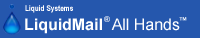
<style>
.page{position:relative;width:200px;height:38px;background:#2557ad}
.page>*{position:absolute;margin:0}
.t1{font:8px "ArialNarrow-Bold";color:#ffffff}
.t2{font:8px "Arial-BoldMT"}
.t3{font:8px "Arial-BoldMT";color:#ffffff}
.t4{font:15.9px "Arial-BoldMT";color:#ffffff}
.t5{font:15.9px "ArialMT";color:#ffffff}
</style>
<div class="page">
<p class="t1" style="left:25px;top:5px;width:48px;height:8px">Liquid Systems</p>
<p class="t2" style="left:104px;top:16px;width:6px;height:6px">®</p>
<p class="t3" style="left:179px;top:17px;width:8px;height:4px">™</p>
<p class="t4" style="left:25px;top:18px;width:155px;height:16px">LiquidMail  <span class="t5">All Hands</span></p>
</div>
